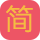
<style>
.page{position:relative;width:40px;height:40px;background:#ed5565}
.page>*{position:absolute;margin:0}
.t1{font:30px "MicrosoftJhengHeiRegular";color:#f5bb41;font-weight:bold}
</style>
<div class="page">
<p class="t1" style="left:6px;top:5px;width:27px;height:28px">简</p>
</div>
